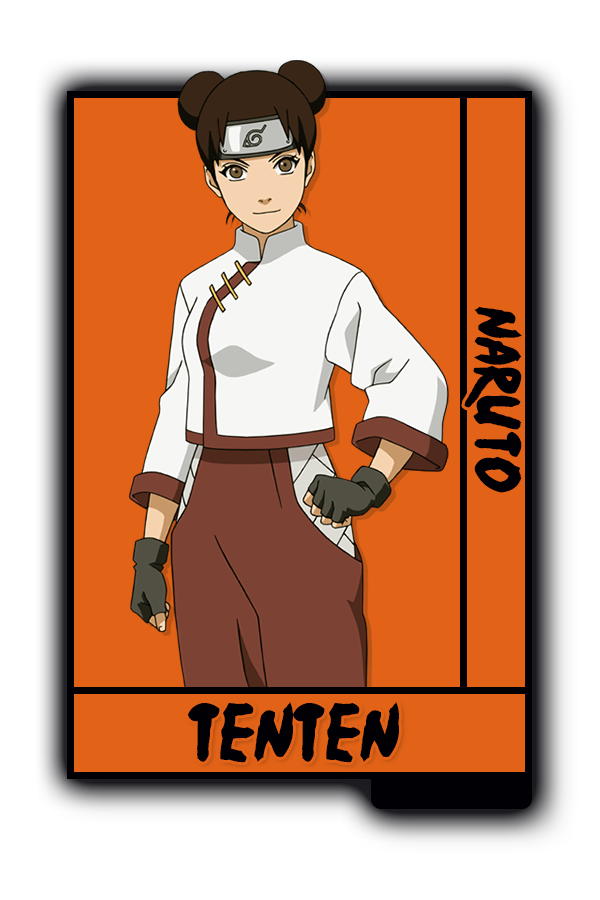
<style>
.page{position:relative;width:600px;height:900px;background:#e26317}
.page>*{position:absolute;margin:0}
.t1{font:52px "Ninja-Naruto";color:#010005}
.t2{font:65.2px "Ninja-Naruto";color:#010005}
</style>
<div class="page">
<p class="t1" style="left:464px;top:307px;width:59px;height:186px;rotate:90deg">Naruto</p>
<p class="t2" style="left:188px;top:701px;width:211px;height:62px">Tenten</p>
</div>
